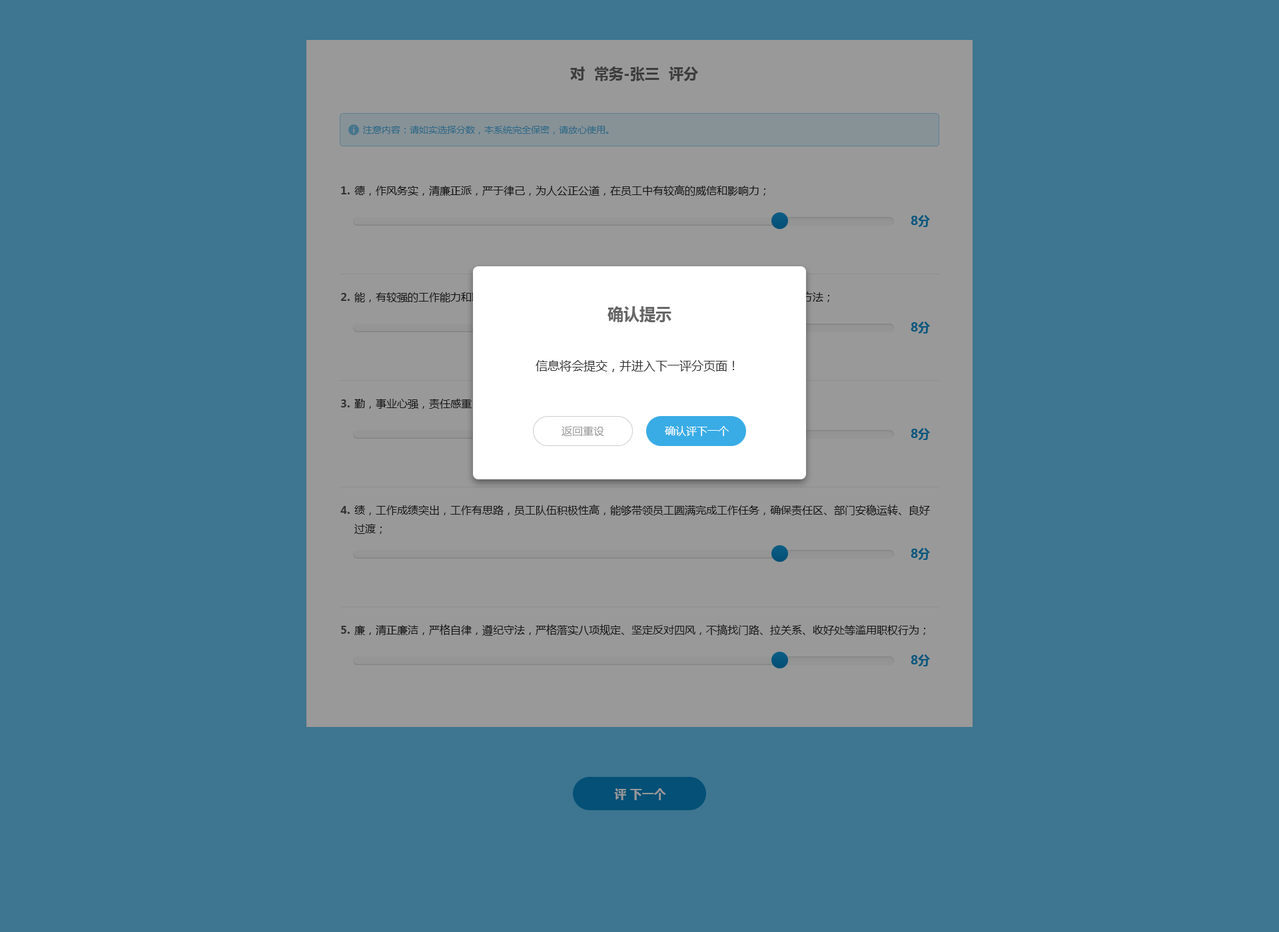
<style>
.page{position:relative;width:1279px;height:932px;background:#3e7590}
.page>*{position:absolute;margin:0}
.t1{font:14.7px "MicrosoftYaHei-Bold";color:#3d3d3d}
.t2{font:9.3px "MicrosoftYaHei";color:#2e6986}
.t3{font:10.7px "MicrosoftYaHei";color:#222222}
.t4{font:10.7px/106.6px "MicrosoftYaHei-Bold";color:#333333}
.t5{font:10.7px/119.9px "MicrosoftYaHei-Bold";color:#333333}
.t6{font:16px "MicrosoftYaHei-Bold";color:#666666}
.t7{font:12px "MicrosoftYaHei";color:#333333}
.t8{font:10.7px "MicrosoftYaHei";color:#999999}
.t9{font:10.7px "MicrosoftYaHei";color:#ffffff}
.t10{font:12px "MicrosoftYaHei-Bold";color:#999999}
</style>
<div class="page">
<p class="t1" style="left:570px;top:67px;width:128px;height:14px">对  常务-张三  评分</p>
<p class="t2" style="left:363px;top:126px;width:246px;height:9px">注意内容：请如实选择分数，本系统完全保密，请放心使用。</p>
<p class="t3" style="left:354px;top:185px;width:411px;height:11px">德，作风务实，清廉正派，严于律己，为人公正公道，在员工中有较高的威信和影响力；</p>
<p class="t4" style="left:340px;top:186px;width:10px;height:448px">1.<br>2.<br>3.<br><span class="t5">4.<br></span>5.</p>
<p class="t6" style="left:607px;top:306px;width:64px;height:16px">确认提示</p>
<p class="t7" style="left:535px;top:360px;width:199px;height:12px">信息将会提交，并进入下一评分页面！</p>
<p class="t8" style="left:561px;top:426px;width:43px;height:10px">返回重设</p>
<p class="t9" style="left:665px;top:426px;width:64px;height:10px">确认评下一个</p>
<p class="t3" style="left:354px;top:505px;width:576px;height:29px">绩，工作成绩突出，工作有思路，员工队伍积极性高，能够带领员工圆满完成工作任务，确保责任区、部门安稳运转、良好过渡；</p>
<p class="t3" style="left:354px;top:625px;width:571px;height:11px">廉，清正廉洁，严格自律，遵纪守法，严格落实八项规定、坚定反对四风，不搞找门路、拉关系、收好处等滥用职权行为；</p>
<p class="t10" style="left:614px;top:789px;width:52px;height:12px">评 下一个</p>
</div>
